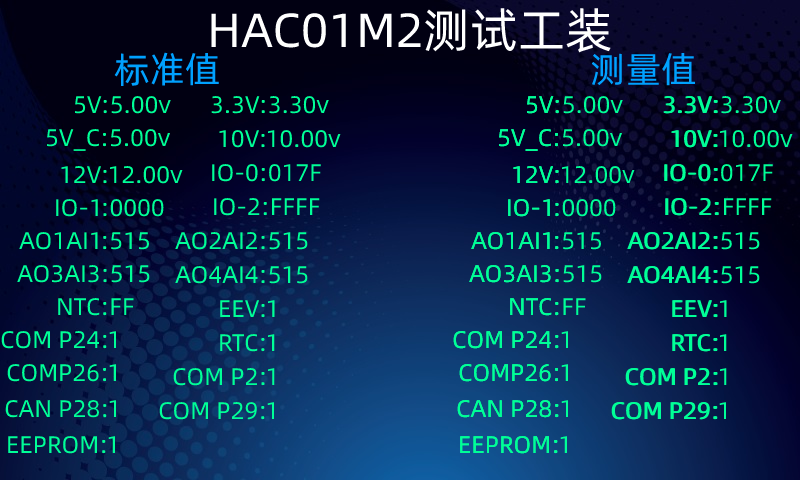
<style>
.page{position:relative;width:800px;height:480px}
.page>*{position:absolute;margin:0}
.t1{font:48px "AlibabaPuHuiTi-Regular";color:#ffffff}
.t2{font:36px "AlibabaPuHuiTi-Regular";color:#00a1ff}
.t3{font:24px "AlibabaPuHuiTi-Regular";color:#00ff97}
</style>
<div class="page">
<p class="t1" style="left:211px;top:8px;width:400px;height:45px">HAC01M2测试工装</p>
<p class="t2" style="left:114px;top:52px;width:582px;height:35px">标准值                                        测量值</p>
<p class="t3" style="left:75px;top:96px;width:96px;height:18px">5V:5.00v</p>
<p class="t3" style="left:211px;top:96px;width:118px;height:18px">3.3V:3.30v</p>
<p class="t3" style="left:527px;top:96px;width:32px;height:18px">5V:</p>
<p class="t3" style="left:527px;top:96px;width:96px;height:18px">5V:5.00v</p>
<p class="t3" style="left:663px;top:96px;width:118px;height:18px">3.3V:3.30v</p>
<p class="t3" style="left:664px;top:96px;width:54px;height:18px">3.3V:</p>
<p class="t3" style="left:47px;top:129px;width:124px;height:22px">5V_C:5.00v</p>
<p class="t3" style="left:219px;top:130px;width:122px;height:18px">10V:10.00v</p>
<p class="t3" style="left:499px;top:129px;width:60px;height:22px">5V_C:</p>
<p class="t3" style="left:499px;top:129px;width:124px;height:22px">5V_C:5.00v</p>
<p class="t3" style="left:671px;top:130px;width:122px;height:18px">10V:10.00v</p>
<p class="t3" style="left:672px;top:130px;width:46px;height:18px">10V:</p>
<p class="t3" style="left:61px;top:166px;width:122px;height:18px">12V:12.00v</p>
<p class="t3" style="left:212px;top:164px;width:109px;height:18px">IO-0:017F</p>
<p class="t3" style="left:513px;top:166px;width:46px;height:18px">12V:</p>
<p class="t3" style="left:513px;top:166px;width:122px;height:18px">12V:12.00v</p>
<p class="t3" style="left:664px;top:164px;width:109px;height:18px">IO-0:017F</p>
<p class="t3" style="left:665px;top:164px;width:53px;height:18px">IO-0:</p>
<p class="t3" style="left:214px;top:198px;width:106px;height:18px">IO-2:FFFF</p>
<p class="t3" style="left:665px;top:198px;width:53px;height:18px">IO-2:</p>
<p class="t3" style="left:666px;top:198px;width:106px;height:18px">IO-2:FFFF</p>
<p class="t3" style="left:56px;top:199px;width:108px;height:18px">IO-1:0000</p>
<p class="t3" style="left:508px;top:199px;width:51px;height:18px">IO-1:</p>
<p class="t3" style="left:508px;top:199px;width:108px;height:18px">IO-1:0000</p>
<p class="t3" style="left:19px;top:232px;width:130px;height:18px">AO1AI1:515</p>
<p class="t3" style="left:175px;top:232px;width:133px;height:18px">AO2AI2:515</p>
<p class="t3" style="left:471px;top:232px;width:88px;height:18px">AO1AI1:</p>
<p class="t3" style="left:471px;top:232px;width:130px;height:18px">AO1AI1:515</p>
<p class="t3" style="left:627px;top:232px;width:133px;height:18px">AO2AI2:515</p>
<p class="t3" style="left:628px;top:232px;width:90px;height:18px">AO2AI2:</p>
<p class="t3" style="left:17px;top:265px;width:133px;height:18px">AO3AI3:515</p>
<p class="t3" style="left:175px;top:266px;width:133px;height:18px">AO4AI4:515</p>
<p class="t3" style="left:469px;top:265px;width:90px;height:18px">AO3AI3:</p>
<p class="t3" style="left:469px;top:265px;width:133px;height:18px">AO3AI3:515</p>
<p class="t3" style="left:627px;top:266px;width:133px;height:18px">AO4AI4:515</p>
<p class="t3" style="left:628px;top:266px;width:90px;height:18px">AO4AI4:</p>
<p class="t3" style="left:58px;top:298px;width:76px;height:18px">NTC:FF</p>
<p class="t3" style="left:220px;top:300px;width:55px;height:18px">EEV:1</p>
<p class="t3" style="left:510px;top:298px;width:49px;height:18px">NTC:</p>
<p class="t3" style="left:510px;top:298px;width:76px;height:18px">NTC:FF</p>
<p class="t3" style="left:672px;top:300px;width:55px;height:18px">EEV:1</p>
<p class="t3" style="left:673px;top:300px;width:45px;height:18px">EEV:</p>
<p class="t3" style="left:1px;top:331px;width:116px;height:18px">COM P24:1</p>
<p class="t3" style="left:220px;top:334px;width:55px;height:18px">RTC:1</p>
<p class="t3" style="left:453px;top:331px;width:106px;height:18px">COM P24:</p>
<p class="t3" style="left:453px;top:331px;width:116px;height:18px">COM P24:1</p>
<p class="t3" style="left:672px;top:334px;width:55px;height:18px">RTC:1</p>
<p class="t3" style="left:673px;top:334px;width:45px;height:18px">RTC:</p>
<p class="t3" style="left:7px;top:364px;width:109px;height:18px">COMP26:1</p>
<p class="t3" style="left:459px;top:364px;width:100px;height:18px">COMP26:</p>
<p class="t3" style="left:459px;top:364px;width:109px;height:18px">COMP26:1</p>
<p class="t3" style="left:173px;top:368px;width:102px;height:18px">COM P2:1</p>
<p class="t3" style="left:625px;top:368px;width:102px;height:18px">COM P2:1</p>
<p class="t3" style="left:626px;top:368px;width:92px;height:18px">COM P2:</p>
<p class="t3" style="left:5px;top:400px;width:112px;height:18px">CAN P28:1</p>
<p class="t3" style="left:457px;top:400px;width:102px;height:18px">CAN P28:</p>
<p class="t3" style="left:457px;top:400px;width:112px;height:18px">CAN P28:1</p>
<p class="t3" style="left:159px;top:402px;width:116px;height:18px">COM P29:1</p>
<p class="t3" style="left:611px;top:402px;width:116px;height:18px">COM P29:1</p>
<p class="t3" style="left:612px;top:402px;width:106px;height:18px">COM P29:</p>
<p class="t3" style="left:8px;top:436px;width:108px;height:18px">EEPROM:1</p>
<p class="t3" style="left:460px;top:436px;width:98px;height:18px">EEPROM:</p>
<p class="t3" style="left:460px;top:436px;width:108px;height:18px">EEPROM:1</p>
</div>
